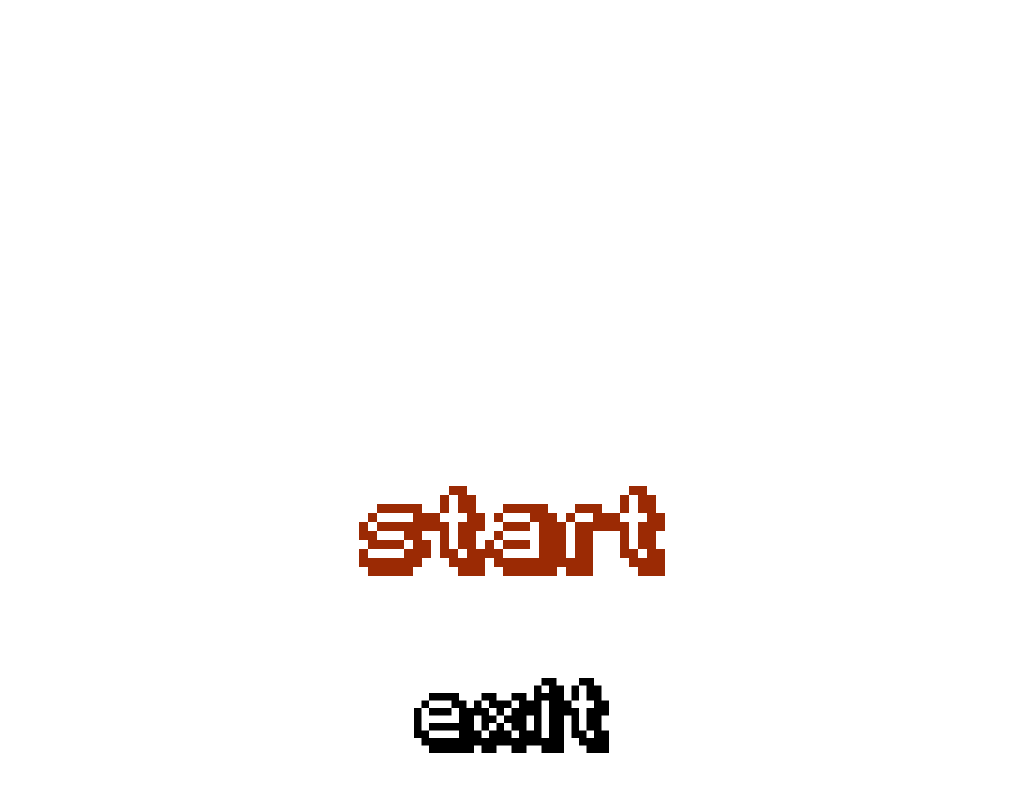
<style>
.page{position:relative;width:1024px;height:798px;background:#ffffff}
.page>*{position:absolute;margin:0}
.t1{font:72px "Fipps-Regular";color:#9b2a04}
.t2{font:60px "Fipps-Regular";color:#000000}
</style>
<div class="page">
<p class="t1" style="left:359px;top:486px;width:306px;height:90px">start</p>
<p class="t2" style="left:414px;top:678px;width:195px;height:75px">exit</p>
</div>
